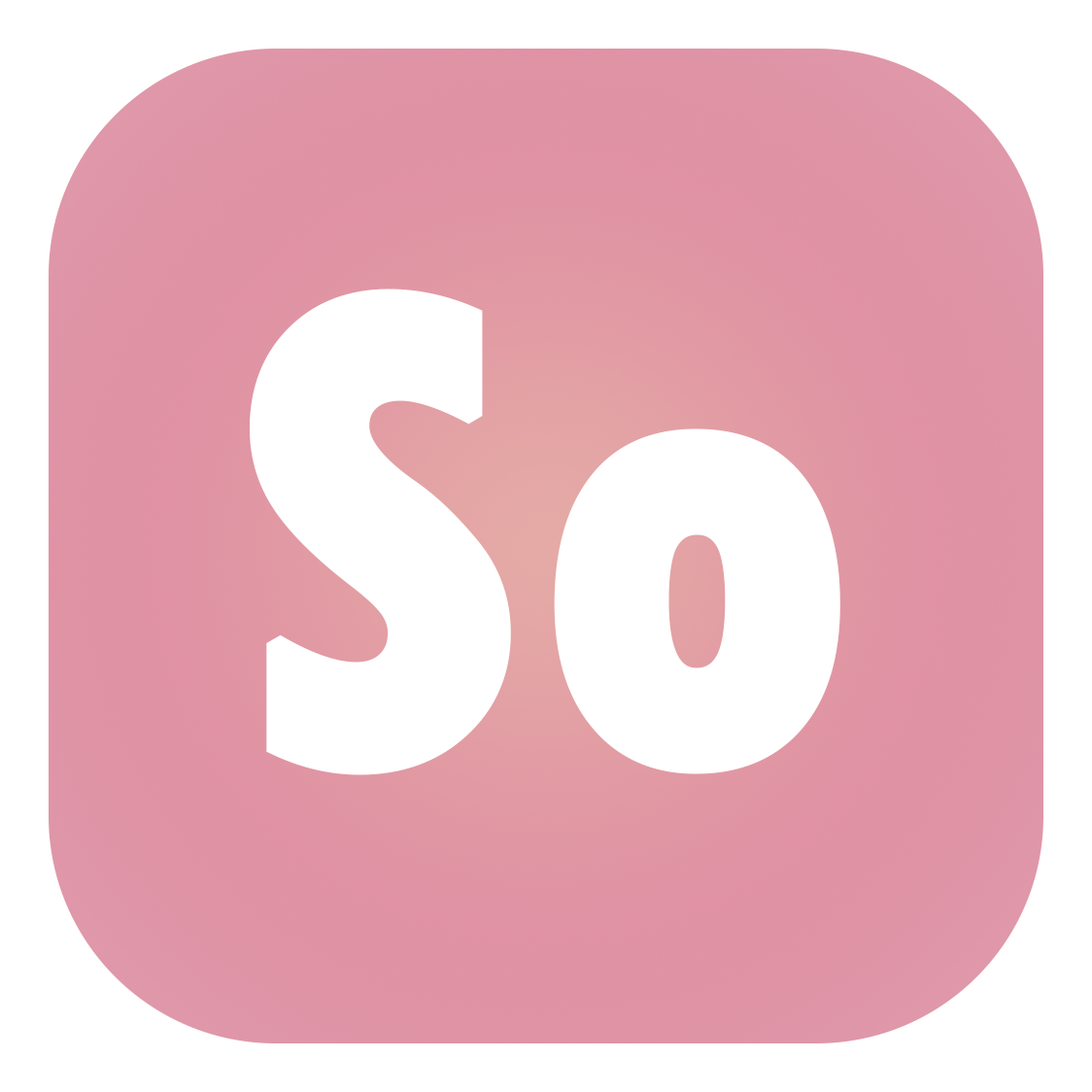
<style>
.page{position:relative;width:1092px;height:1092px;background:#ffffff}
.page>*{position:absolute;margin:0}
.t1{font:680.1px "TwCenMT-CondensedExtraBold";color:#ffffff;font-weight:bold}
</style>
<div class="page">
<p class="t1" style="left:249px;top:289px;width:591px;height:486px">So</p>
</div>
